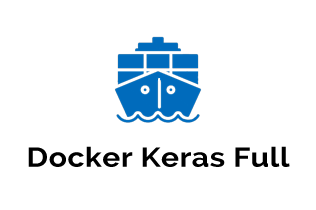
<style>
.page{position:relative;width:316px;height:210px;background:#ffffff}
.page>*{position:absolute;margin:0}
.t1{font:27.3px "Raleway-Bold";letter-spacing:0.02em;color:#000000;scale:1.1 1}
</style>
<div class="page">
<p class="t1" style="left:28px;top:146px;width:262px;height:21px">Docker Keras Full</p>
</div>
